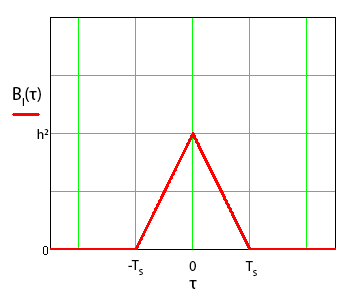
<style>
.page{position:relative;width:355px;height:297px;background:#ffffff}
.page>*{position:absolute;margin:0}
.t1{font:18px "MyriadPro-Regular";color:#000000}
.t2{font:14px "MyriadPro-Regular";color:#000000}
</style>
<div class="page">
<p class="t1" style="left:13px;top:87px;width:28px;height:19px">BI(τ)</p>
<p class="t2" style="left:37px;top:129px;width:12px;height:10px">h2</p>
<p class="t2" style="left:128px;top:260px;width:15px;height:15px">-TS</p>
<p class="t2" style="left:189px;top:261px;width:7px;height:10px">0</p>
<p class="t2" style="left:245px;top:261px;width:12px;height:15px">TS</p>
<p class="t1" style="left:189px;top:280px;width:8px;height:9px">τ</p>
</div>
